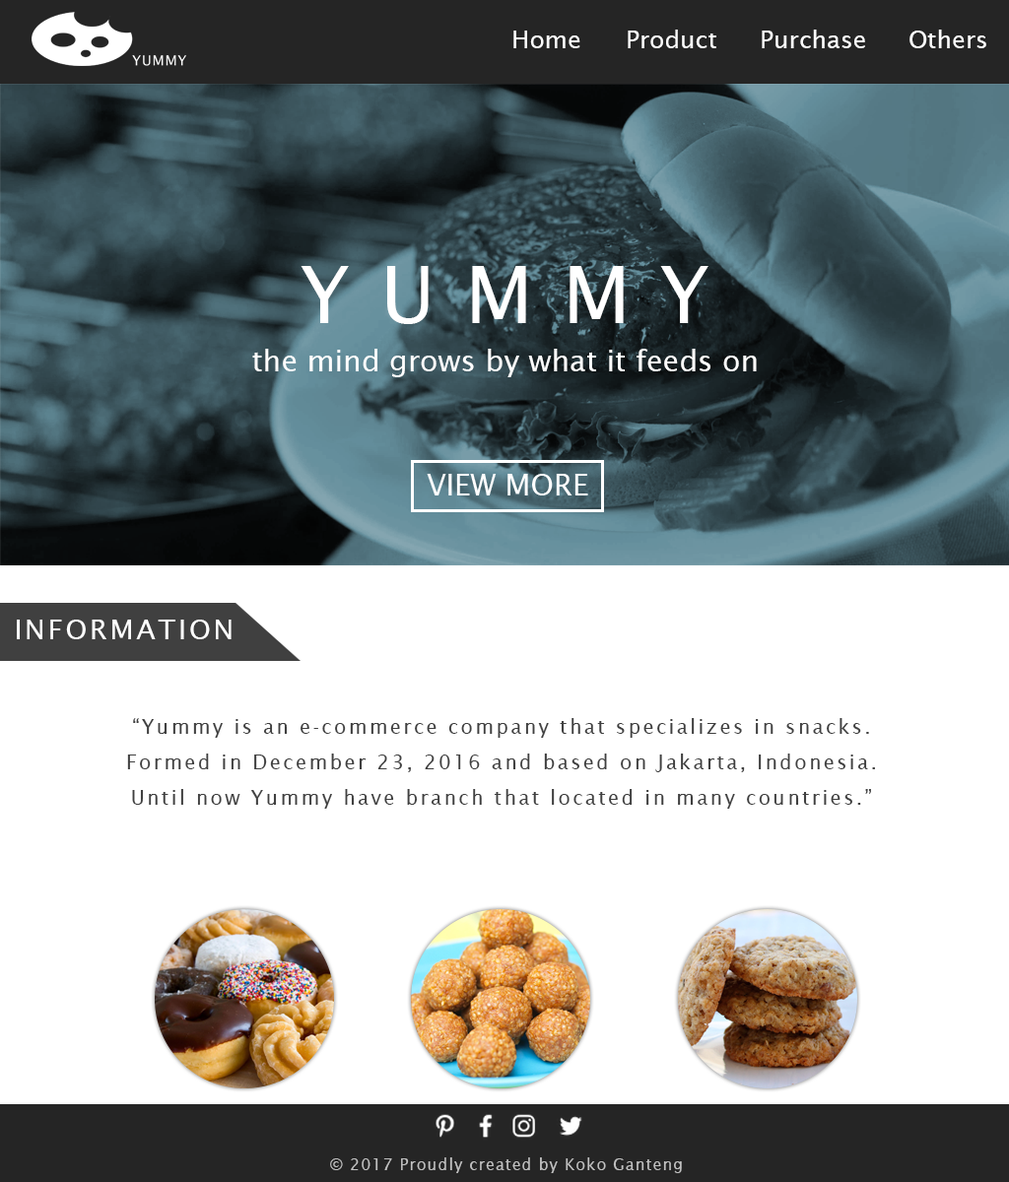
<style>
.page{position:relative;width:1009px;height:1182px;background:#ffffff}
.page>*{position:absolute;margin:0}
.t1{font:24.6px "LucidaSans";color:#ffffff}
.t2{font:78.8px "LucidaSans";letter-spacing:0.38em;color:#ffffff}
.t3{font:29.6px "LucidaSans";color:#ffffff}
.t4{font:27.6px "LucidaSans";letter-spacing:0.1em;color:#ffffff}
.t5{font:19.7px/35.5px "LucidaSans";letter-spacing:0.12em;color:#404040}
.t6{font:15.8px "LucidaSans";letter-spacing:0.06em;color:#c1c1c1}
</style>
<div class="page">
<p class="t1" style="left:628px;top:30px;width:88px;height:18px">Product</p>
<p class="t1" style="left:761px;top:30px;width:104px;height:18px">Purchase</p>
<p class="t1" style="left:909px;top:30px;width:77px;height:18px">Others</p>
<p class="t1" style="left:513px;top:31px;width:67px;height:17px">Home</p>
<p class="t2" style="left:300px;top:266px;width:408px;height:58px">YUMMY</p>
<p class="t3" style="left:252px;top:349px;width:505px;height:28px">the mind grows by what it feeds on</p>
<p class="t4" style="left:17px;top:620px;width:214px;height:19px">INFORMATION</p>
<p class="t5" style="left:127px;top:718px;width:748px;height:91px;text-align:center">“Yummy is an e-commerce company that specializes in snacks.<br>Formed in December 23, 2016 and based on Jakarta, Indonesia.<br>Until now Yummy have branch that located in many countries.”</p>
<p class="t6" style="left:330px;top:1157px;width:352px;height:16px">© 2017 Proudly created by Koko Ganteng</p>
</div>
